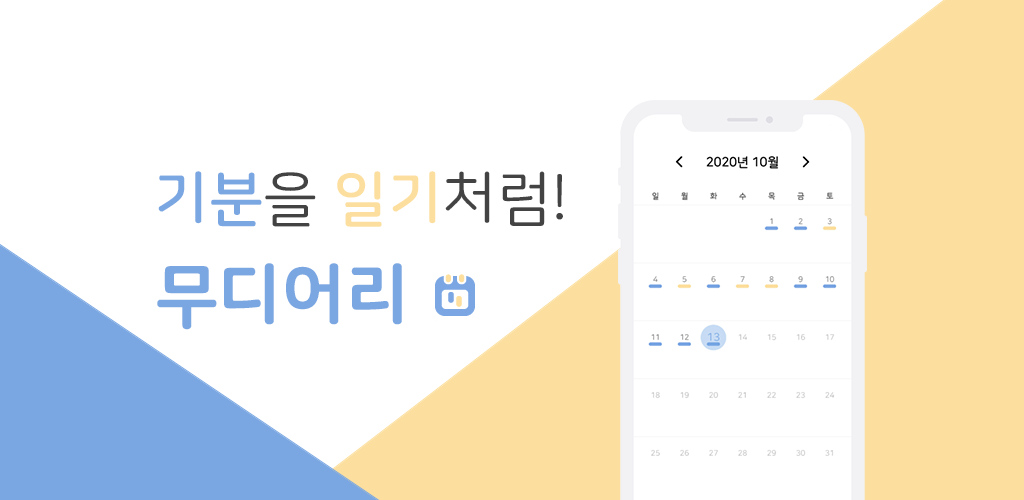
<style>
.page{position:relative;width:1024px;height:500px;background:#ffffff}
.page>*{position:absolute;margin:0}
.t1{font:60px "NanumSquareRoundOTFR";color:#434343}
.t2{font:60px "NanumSquareRoundOTFB";color:#7aa7e2}
.t3{font:60px "NanumSquareRoundOTFB";color:#fcdf9e}
.t4{font:70px "NanumSquareRoundOTFEB";color:#7aa7e2}
</style>
<div class="page">
<p class="t1" style="left:158px;top:171px;width:405px;height:56px"><span class="t2">기분</span>을 <span class="t3">일기</span>처럼!</p>
<p class="t4" style="left:157px;top:263px;width:245px;height:67px">무디어리</p>
</div>
